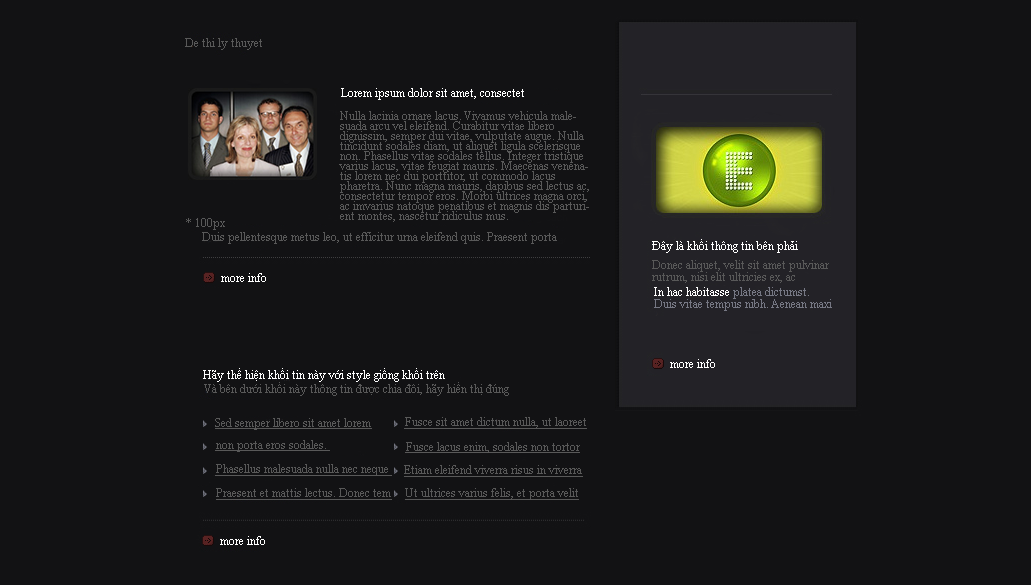
<style>
.page{position:relative;width:1031px;height:585px;background:#121214}
.page>*{position:absolute;margin:0}
.t1{font:12px "TimesNewRomanPSMT";color:#595959}
.t2{font:12px "TimesNewRomanPSMT";color:#ffffff}
.t3{font:12px/10px "TimesNewRomanPSMT";color:#595959}
.t4{font:12px/12px "TimesNewRomanPSMT";color:#595959}
.t5{font:12px/12px "TimesNewRomanPSMT";color:#767884}
.t6{font:12px/12px "TimesNewRomanPSMT";color:#ffffff}
.t7{font:12px "TimesNewRomanPSMT";color:#595959;text-decoration:underline}
</style>
<div class="page">
<p class="t1" style="left:185px;top:38px;width:77px;height:12px">De thi ly thuyet</p>
<p class="t2" style="left:341px;top:88px;width:183px;height:12px">Lorem ipsum dolor sit amet, consectet</p>
<p class="t3" style="left:339px;top:111px;width:250px;height:111px">Nulla lacinia ornare lacus. Vivamus vehicula malesuada arcu vel eleifend. Curabitur vitae libero dignissim, semper dui vitae, vulputate augue. Nulla tincidunt sodales diam, ut aliquet ligula scelerisque non. Phasellus vitae sodales tellus. Integer tristique varius lacus, vitae feugiat mauris. Maecenas venenatis lorem nec dui porttitor, ut commodo lacus pharetra. Nunc magna mauris, dapibus sed lectus ac, consectetur tempor eros. Morbi ultrices magna orci, ac imvarius natoque penatibus et magnis dis parturient montes, nascetur ridiculus mus.</p>
<p class="t1" style="left:186px;top:218px;width:39px;height:12px">* 100px</p>
<p class="t1" style="left:202px;top:232px;width:355px;height:12px">Duis pellentesque metus leo, ut efficitur urna eleifend quis. Praesent porta</p>
<p class="t2" style="left:652px;top:239px;width:146px;height:14px">Đây là khối thông tin bên phải</p>
<p class="t4" style="left:652px;top:260px;width:177px;height:23px">Donec aliquet, velit sit amet pulvinar<br>rutrum, nisi elit ultricies ex, ac</p>
<p class="t2" style="left:221px;top:273px;width:45px;height:9px">more info</p>
<p class="t5" style="left:654px;top:287px;width:178px;height:24px"><span class="t6">In hac habitasse </span>platea dictumst. <br>Duis vitae tempus nibh. Aenean maxi</p>
<p class="t2" style="left:670px;top:359px;width:45px;height:9px">more info</p>
<p class="t2" style="left:203px;top:368px;width:242px;height:14px">Hãy thể hiện khối tin này với style giống khối trên</p>
<p class="t1" style="left:204px;top:382px;width:305px;height:14px">Và bên dưới khối này thông tin được chia đôi, hãy hiển thị đúng</p>
<p class="t7" style="left:215px;top:418px;width:157px;height:12px">Sed semper libero sit amet lorem</p>
<p class="t7" style="left:404px;top:417px;width:183px;height:12px">Fusce sit amet dictum nulla, ut laoreet</p>
<p class="t7" style="left:215px;top:440px;width:115px;height:12px">non porta eros sodales.</p>
<p class="t7" style="left:405px;top:442px;width:175px;height:11px">Fusce lacus enim, sodales non tortor</p>
<p class="t7" style="left:215px;top:464px;width:177px;height:12px">Phasellus malesuada nulla nec neque</p>
<p class="t7" style="left:404px;top:465px;width:179px;height:12px">Etiam eleifend viverra risus in viverra</p>
<p class="t7" style="left:216px;top:488px;width:176px;height:12px">Praesent et mattis lectus. Donec tem</p>
<p class="t7" style="left:405px;top:488px;width:174px;height:12px">Ut ultrices varius felis, et porta velit</p>
<p class="t2" style="left:220px;top:536px;width:45px;height:9px">more info</p>
</div>
